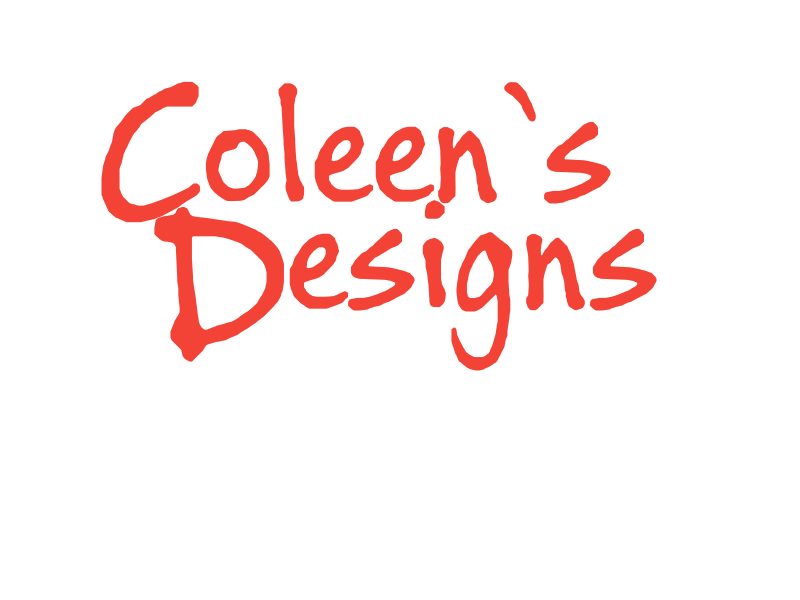
<style>
.page{position:relative;width:800px;height:600px;background:#ffffff}
.page>*{position:absolute;margin:0}
.t1{font:230px "BuxtonSketch";color:#f44336}
.t2{font:165px "BuxtonSketch";color:#f44336}
</style>
<div class="page">
<p class="t1" style="left:101px;top:81px;width:99px;height:142px">C</p>
<p class="t2" style="left:205px;top:82px;width:406px;height:122px">oleen`s</p>
<p class="t1" style="left:154px;top:206px;width:130px;height:156px">D</p>
<p class="t2" style="left:289px;top:200px;width:368px;height:171px">esigns</p>
</div>
